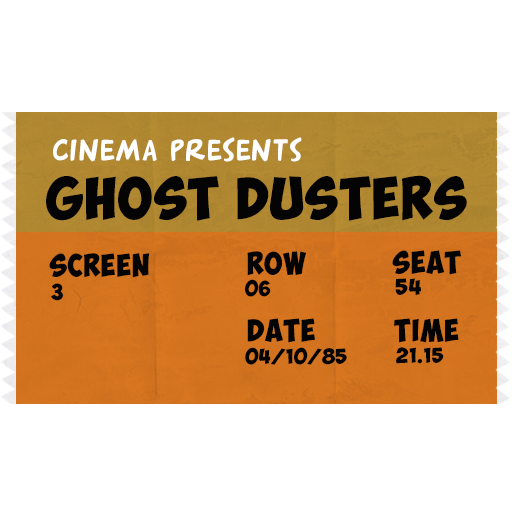
<style>
.page{position:relative;width:512px;height:512px;background:#ffffff}
.page>*{position:absolute;margin:0}
.t1{font:29.5px "Arnold21";letter-spacing:0.04em;color:#ffffff}
.t2{font:41.9px "ObelixPro";letter-spacing:0.04em;color:#040404}
.t3{font:22.5px "ObelixPro";letter-spacing:0.04em;color:#040404}
.t4{font:15.1px "ObelixPro";letter-spacing:0.04em;color:#040404}
.t5{font:16.2px "ObelixPro";letter-spacing:0.04em;color:#040404}
</style>
<div class="page">
<p class="t1" style="left:53px;top:137px;width:249px;height:25px">Cinema presents</p>
<p class="t2" style="left:46px;top:175px;width:421px;height:46px">Ghost dusters</p>
<p class="t3" style="left:49px;top:253px;width:100px;height:25px">Screen</p>
<p class="t3" style="left:247px;top:251px;width:60px;height:25px">Row</p>
<p class="t3" style="left:392px;top:250px;width:69px;height:25px">Seat</p>
<p class="t4" style="left:245px;top:279px;width:26px;height:18px">06</p>
<p class="t5" style="left:395px;top:278px;width:27px;height:17px">54</p>
<p class="t5" style="left:51px;top:283px;width:12px;height:18px">3</p>
<p class="t3" style="left:247px;top:318px;width:212px;height:25px">Date         time</p>
<p class="t4" style="left:245px;top:347px;width:102px;height:18px">04/10/85</p>
<p class="t4" style="left:396px;top:347px;width:48px;height:17px">21.15</p>
</div>
